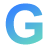
<style>
.page{position:relative;width:48px;height:48px;background:#ffffff}
.page>*{position:absolute;margin:0}
.t1{font:55px "Arial-BoldMT";letter-spacing:0.1em}
</style>
<div class="page">
<p class="t1" style="left:5px;top:3px;width:38px;height:42px">G</p>
</div>
